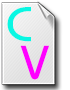
<style>
.page{position:relative;width:70px;height:90px}
.page>*{position:absolute;margin:0}
.t1{font:48.8px "BauhausITCbyBT-Medium";color:#09f7e3;scale:1.1 1}
.t2{font:47.3px "BauhausITCbyBT-Medium";color:#ff00ff;scale:1.08 1}
</style>
<div class="page">
<p class="t1" style="left:7px;top:7px;width:24px;height:35px">C</p>
<p class="t2" style="left:20px;top:45px;width:29px;height:35px">V</p>
</div>
